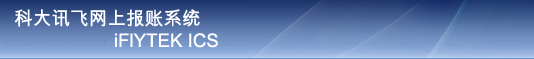
<style>
.page{position:relative;width:534px;height:59px}
.page>*{position:absolute;margin:0}
.t1{font:18.7px "ArialUnicodeMS";color:#ffffff}
.t2{font:18.7px "BradleyHandITC";color:#ffffff}
.t3{font:18.7px "BradleyHandITC";color:#ff3333}
.t4{font:18.7px "ArialMT";color:#ffffff}
</style>
<div class="page">
<p class="t1" style="left:14px;top:9px;width:186px;height:18px">科大讯飞网上报账系统<span class="t2">账</span><span class="t3">系统</span></p>
<p class="t4" style="left:115px;top:33px;width:103px;height:15px">iFlYTEK ICS</p>
</div>
